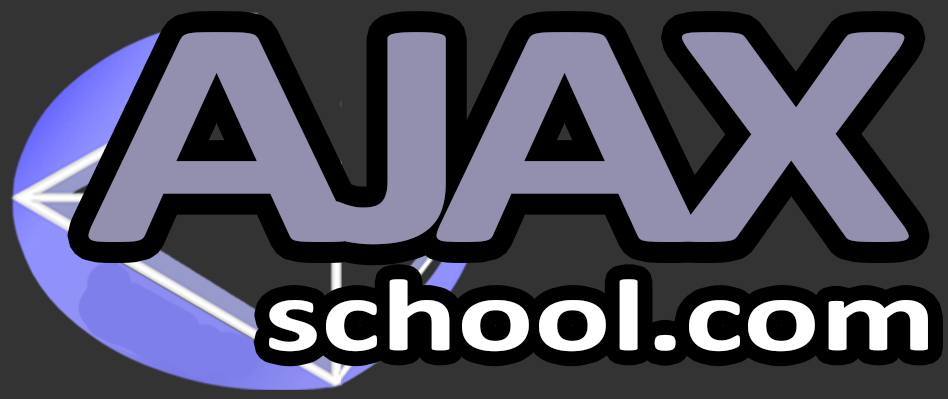
<style>
.page{position:relative;width:948px;height:399px;background:#333333}
.page>*{position:absolute;margin:0}
.t1{font:329.2px "Calibri-Bold";letter-spacing:-0.079em;color:#9390af;scale:1.37 1}
.t2{font:104.2px "Calibri-Bold";color:#ffffff;scale:1.37 1}
</style>
<div class="page">
<p class="t1" style="left:88px;top:32px;width:821px;height:213px">AJAX</p>
<p class="t2" style="left:269px;top:279px;width:659px;height:73px">school.com</p>
</div>
